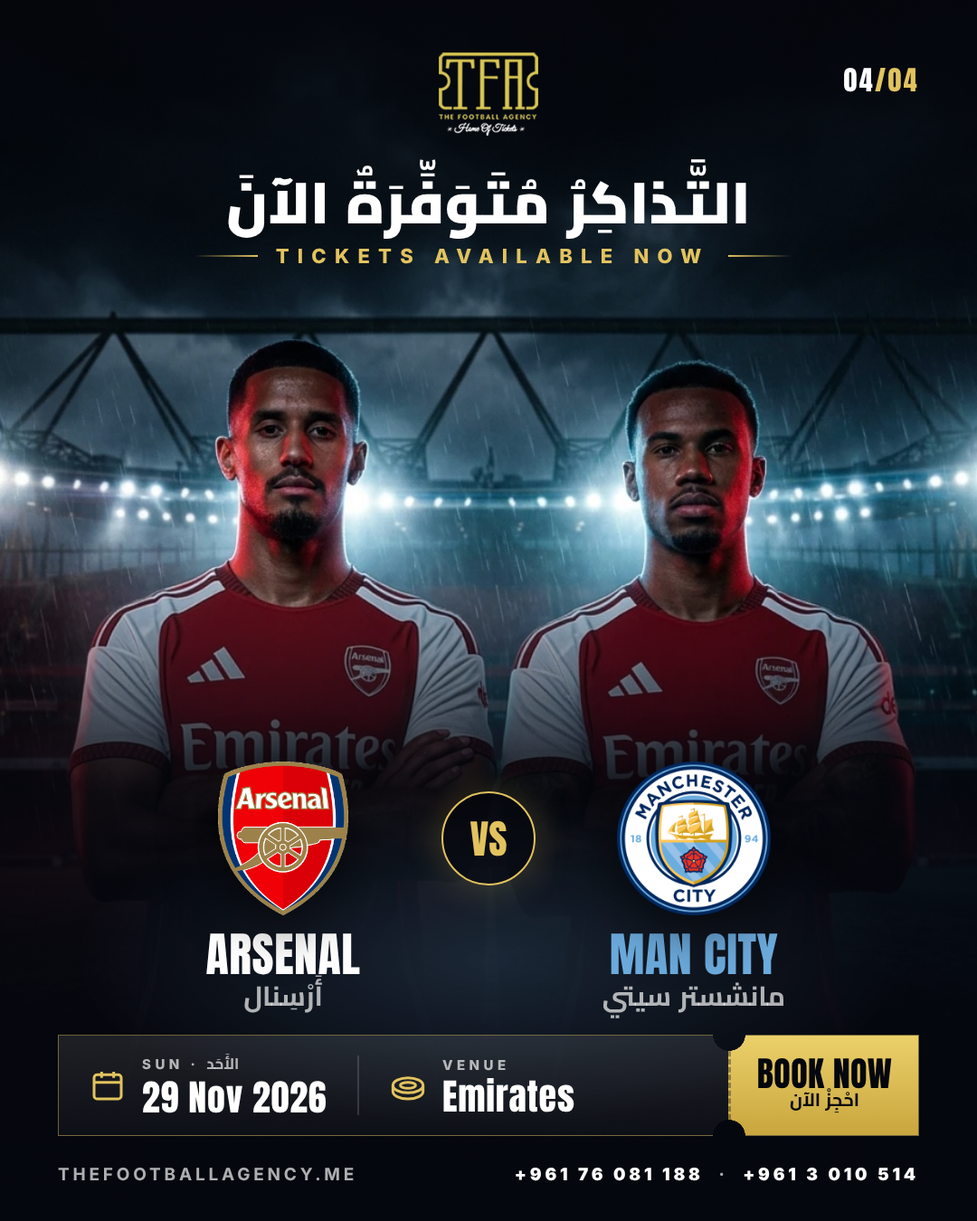
<style>
.page{position:relative;width:977px;height:1221px}
.page>*{position:absolute;margin:0}
.t1{font:27.1px "Anton-Regular";letter-spacing:0.08em;color:#e2c35f}
.t2{font:27.1px "Anton-Regular";letter-spacing:0.08em;color:#ffffff}
.t3{font:57.9px "Cairo-Black";color:#ffffff}
.t4{font:19.9px "Inter-ExtraBold";letter-spacing:0.42em;color:#e2c35f}
.t5{font:39.8px "Anton-Regular";color:#e2c35f}
.t6{font:47px "Anton-Regular";letter-spacing:0.01em;color:#ffffff}
.t7{font:47px "Anton-Regular";letter-spacing:0.01em;color:#6cabdd}
.t8{font:27.1px "Cairo-Bold"}
.t9{font:15.4px "Cairo-Bold"}
.t10{font:13.6px "Inter-ExtraBold";letter-spacing:0.3em}
.t11{font:34.4px "Anton-Regular";letter-spacing:0.01em;color:#05070e}
.t12{font:36.2px "Anton-Regular";letter-spacing:0.02em;color:#ffffff}
.t13{font:18.1px "Cairo-Bold";color:#05070e}
.t14{font:17.2px "Inter-Bold";letter-spacing:0.2em}
.t15{font:17.2px "Inter-ExtraBold";letter-spacing:0.2em;color:#ffffff}
.t16{font:17.2px "Inter-Bold";letter-spacing:0.2em;color:#ffffff}
</style>
<div class="page">
<p class="t1" style="left:844px;top:68px;width:73px;height:24px"><span class="t2">04</span>/04</p>
<p class="t3" style="left:228px;top:159px;width:518px;height:80px">التَّذاكِرُ مُتَوَفِّرَةٌ الآنَ</p>
<p class="t4" style="left:276px;top:248px;width:425px;height:16px">TICKETS AVAILABLE NOW</p>
<p class="t5" style="left:470px;top:820px;width:36px;height:36px">VS</p>
<p class="t6" style="left:206px;top:933px;width:154px;height:42px">ARSENAL</p>
<p class="t7" style="left:610px;top:933px;width:168px;height:42px">MAN CITY</p>
<p class="t8" style="left:244px;top:975px;width:78px;height:38px">أَرْسِنال</p>
<p class="t8" style="left:603px;top:982px;width:180px;height:36px">مانشستر سيتي</p>
<p class="t9" style="left:142px;top:1054px;width:96px;height:16px"><span class="t10">SUN · </span>الأَحَد</p>
<p class="t10" style="left:442px;top:1060px;width:64px;height:11px">VENUE</p>
<p class="t11" style="left:758px;top:1058px;width:134px;height:31px">BOOK NOW</p>
<p class="t12" style="left:143px;top:1081px;width:183px;height:32px">29 Nov 2026</p>
<p class="t12" style="left:443px;top:1078px;width:131px;height:34px">Emirates</p>
<p class="t13" style="left:790px;top:1088px;width:68px;height:25px">احْجِزْ الآن</p>
<p class="t14" style="left:58px;top:1168px;width:296px;height:13px">THEFOOTBALLAGENCY.ME</p>
<p class="t15" style="left:515px;top:1168px;width:400px;height:13px">+961 76 081 188<span class="t16">  ·  </span>+961 3 010 514</p>
</div>
